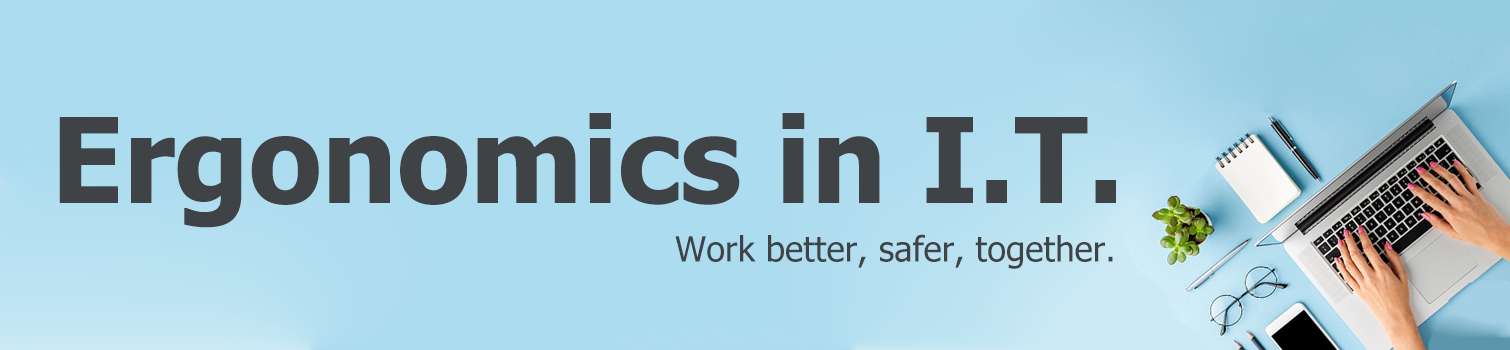
<style>
.page{position:relative;width:1510px;height:350px;background:#acdcef}
.page>*{position:absolute;margin:0}
.t1{font:118px "Tahoma-Bold";color:#404345}
.t2{font:34.7px "Tahoma";color:#404345}
</style>
<div class="page">
<p class="t1" style="left:59px;top:113px;width:1057px;height:115px">Ergonomics in I.T.</p>
<p class="t2" style="left:675px;top:234px;width:438px;height:35px">Work better, safer, together.</p>
</div>
